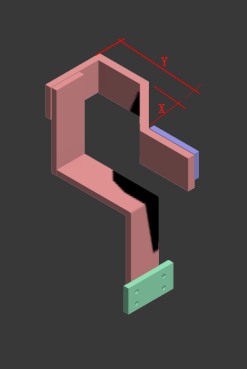
<style>
.page{position:relative;width:247px;height:369px;background:#383838}
.page>*{position:absolute;margin:0}
.t1{font:13.3px "NSimSun";color:#f90906}
</style>
<div class="page">
<p class="t1" style="left:161px;top:57px;width:7px;height:9px">Y</p>
<p class="t1" style="left:158px;top:104px;width:7px;height:9px">X</p>
</div>
